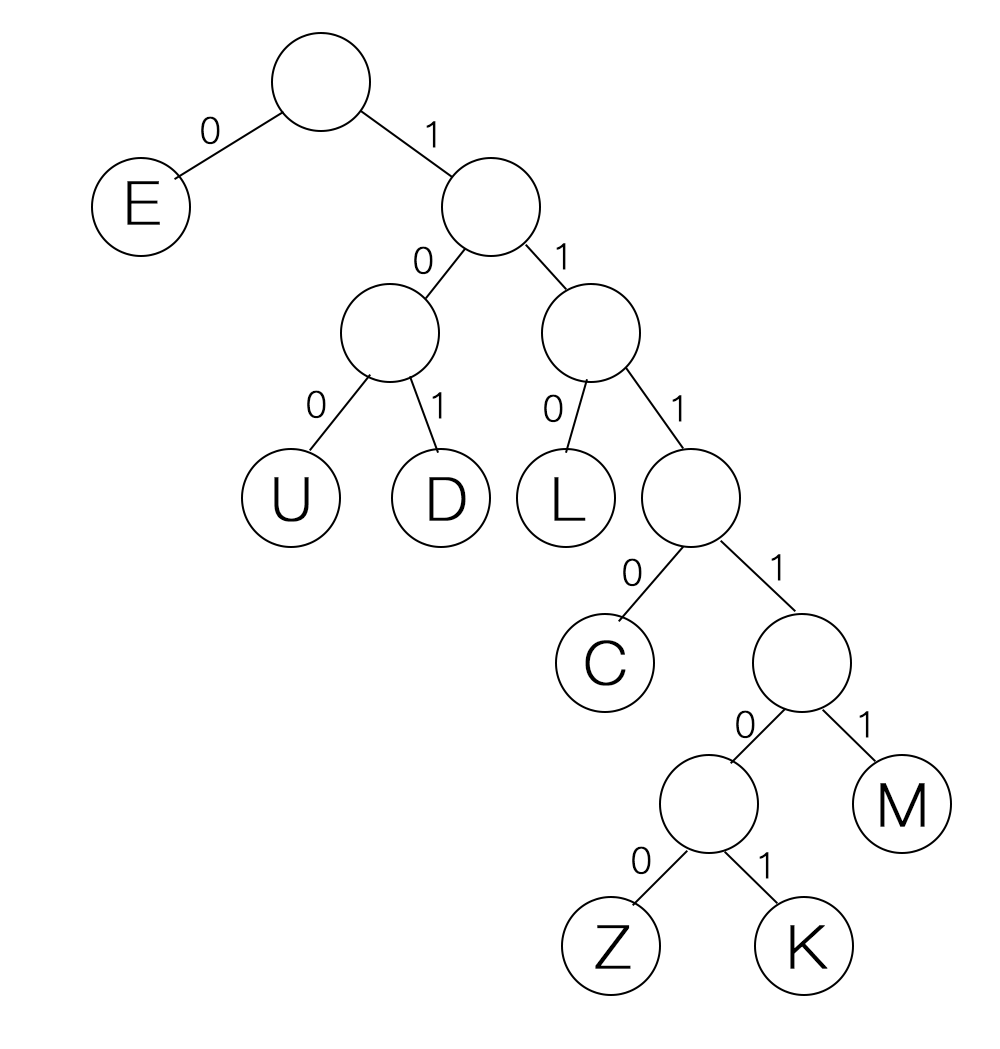
<style>
.page{position:relative;width:1000px;height:1049px;background:#ffffff}
.page>*{position:absolute;margin:0}
.t1{font:36px "PingFangSC-Thin";color:#000000;font-weight:bold}
.t2{font:60px "PingFangSC-Thin";color:#000000;font-weight:bold}
</style>
<div class="page">
<p class="t1" style="left:201px;top:116px;width:19px;height:29px">0</p>
<p class="t1" style="left:426px;top:121px;width:10px;height:27px">1</p>
<p class="t2" style="left:127px;top:181px;width:33px;height:44px">E</p>
<p class="t1" style="left:414px;top:246px;width:19px;height:29px">0</p>
<p class="t1" style="left:556px;top:243px;width:10px;height:27px">1</p>
<p class="t1" style="left:307px;top:390px;width:19px;height:29px">0</p>
<p class="t1" style="left:432px;top:392px;width:10px;height:27px">1</p>
<p class="t1" style="left:544px;top:394px;width:19px;height:29px">0</p>
<p class="t1" style="left:672px;top:395px;width:10px;height:27px">1</p>
<p class="t2" style="left:274px;top:477px;width:35px;height:45px">U</p>
<p class="t2" style="left:429px;top:477px;width:37px;height:44px">D</p>
<p class="t2" style="left:554px;top:477px;width:32px;height:44px">L</p>
<p class="t1" style="left:623px;top:558px;width:19px;height:29px">0</p>
<p class="t1" style="left:771px;top:554px;width:10px;height:27px">1</p>
<p class="t2" style="left:585px;top:640px;width:41px;height:46px">C</p>
<p class="t1" style="left:736px;top:710px;width:19px;height:29px">0</p>
<p class="t1" style="left:859px;top:711px;width:10px;height:27px">1</p>
<p class="t2" style="left:880px;top:783px;width:45px;height:44px">M</p>
<p class="t1" style="left:632px;top:846px;width:19px;height:29px">0</p>
<p class="t1" style="left:759px;top:852px;width:10px;height:27px">1</p>
<p class="t2" style="left:595px;top:925px;width:36px;height:44px">Z</p>
<p class="t2" style="left:790px;top:925px;width:38px;height:44px">K</p>
</div>
